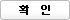
<style>
.page{position:relative;width:70px;height:20px;background:#ffffff}
.page>*{position:absolute;margin:0}
.t1{font:12px "morris9";color:#000000;font-weight:bold;scale:0.96 1}
</style>
<div class="page">
<p class="t1" style="left:19px;top:5px;width:31px;height:10px">확  인</p>
</div>
